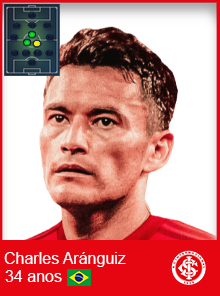
<style>
.page{position:relative;width:220px;height:296px;background:#ffffff}
.page>*{position:absolute;margin:0}
.t1{font:16px "ArialMT";color:#ffffff}
</style>
<div class="page">
<p class="t1" style="left:4px;top:252px;width:122px;height:15px">Charles Aránguiz</p>
<p class="t1" style="left:5px;top:270px;width:57px;height:12px">34 anos</p>
</div>
